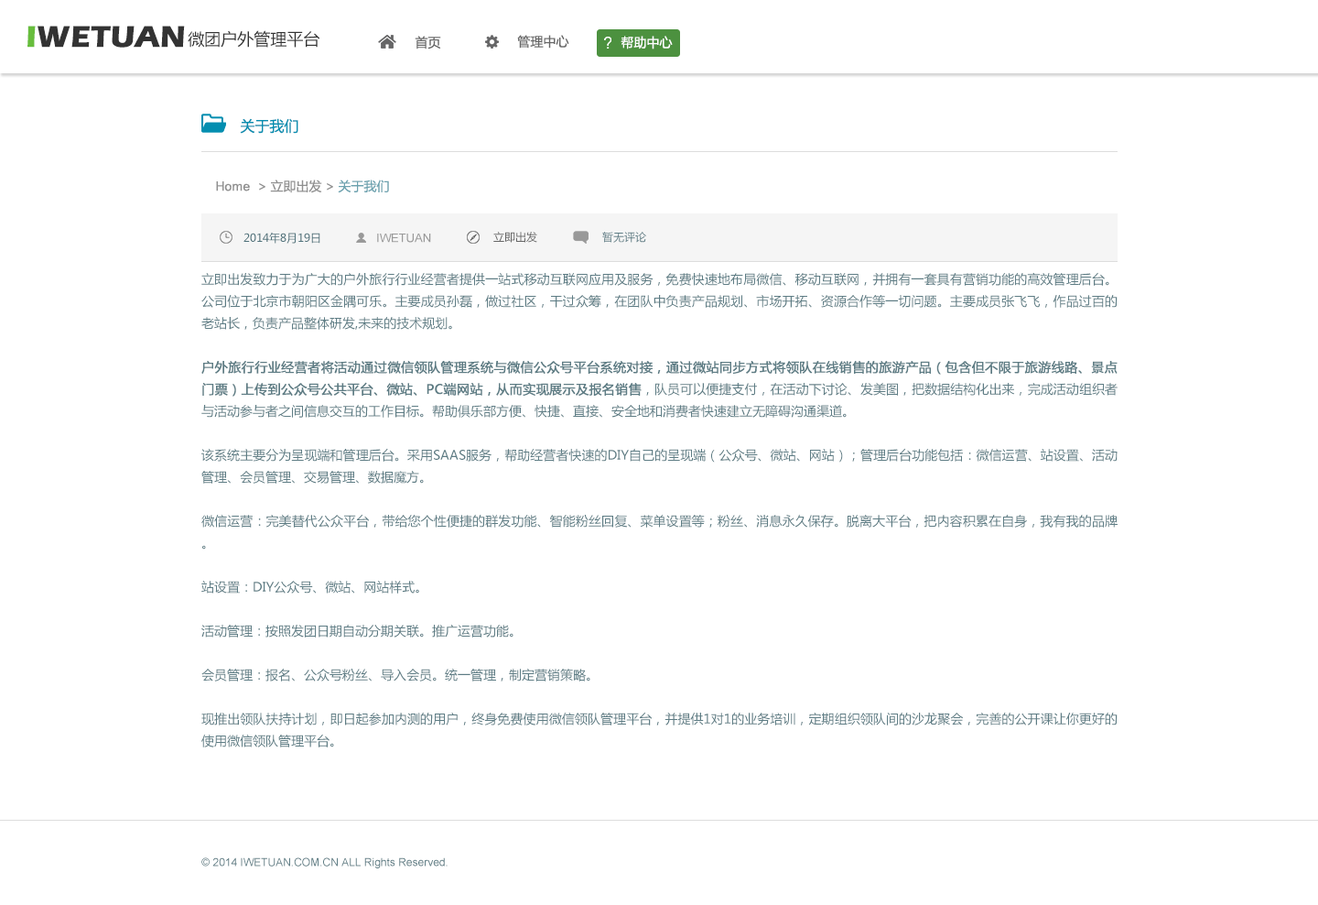
<style>
.page{position:relative;width:1318px;height:905px;background:#ffffff}
.page>*{position:absolute;margin:0}
.t1{font:31.1px "ErasITC-Bold";color:#333333}
.t2{font:31.1px "ErasITC-Bold";color:#67bd3c}
.t3{font:16.5px "MicrosoftYaHei";color:#333333}
.t4{font:12.8px "MicrosoftYaHei";color:#666666}
.t5{font:12.8px "MicrosoftYaHei";color:#ffffff}
.t6{font:14.6px "MicrosoftYaHei";color:#048eb0}
.t7{font:12.8px "MicrosoftYaHei";color:#8f8f8f}
.t8{font:12.8px "ArialMT";color:#8f8f8f}
.t9{font:12.8px "MicrosoftYaHei";color:#6ca2af}
.t10{font:11px "MicrosoftYaHei";color:#4e717a}
.t11{font:11.9px "ArialMT";color:#999999}
.t12{font:11px "MicrosoftYaHei";color:#666666}
.t13{font:11px "MicrosoftYaHei";color:#5d7c84}
.t14{font:12.8px/22px "MicrosoftYaHei";color:#5d7c84}
.t15{font:12.8px/22px "MicrosoftYaHei";color:#5d7c84;font-weight:bold}
.t16{font:11px "ArialMT";color:#5d7c84}
</style>
<div class="page">
<p class="t1" style="left:27px;top:26px;width:158px;height:22px"><span class="t2">I</span>WETUAN</p>
<p class="t3" style="left:188px;top:30px;width:132px;height:18px">微团户外管理平台</p>
<p class="t4" style="left:415px;top:36px;width:26px;height:13px">首页</p>
<p class="t4" style="left:517px;top:35px;width:52px;height:14px">管理中心</p>
<p class="t5" style="left:621px;top:36px;width:52px;height:13px">帮助中心</p>
<p class="t6" style="left:240px;top:118px;width:58px;height:16px">关于我们</p>
<p class="t7" style="left:216px;top:179px;width:173px;height:14px"><span class="t8">Home  </span>&gt; 立即出发 &gt; <span class="t9">关于我们</span></p>
<p class="t10" style="left:244px;top:232px;width:76px;height:12px">2014年8月19日</p>
<p class="t11" style="left:377px;top:233px;width:54px;height:10px">IWETUAN</p>
<p class="t12" style="left:493px;top:232px;width:44px;height:11px">立即出发</p>
<p class="t13" style="left:602px;top:232px;width:44px;height:11px">暂无评论</p>
<p class="t14" style="left:201px;top:272px;width:917px;height:475px;text-align:justify">立即出发致力于为广大的户外旅行行业经营者提供一站式移动互联网应用及服务，免费快速地布局微信、移动互联网，并拥有一套具有营销功能的高效管理后台。公司位于北京市朝阳区金隅可乐。主要成员孙磊，做过社区，干过众筹，在团队中负责产品规划、市场开拓、资源合作等一切问题。主要成员张飞飞，作品过百的老站长，负责产品整体研发,未来的技术规划。<br><br><span class="t15">户外旅行行业经营者将活动通过微信领队管理系统与微信公众号平台系统对接，通过微站同步方式将领队在线销售的旅游产品（包含但不限于旅游线路、景点门票）上传到公众号公共平台、微站、PC端网站，从而实现展示及报名销售</span>，队员可以便捷支付，在活动下讨论、发美图，把数据结构化出来，完成活动组织者与活动参与者之间信息交互的工作目标。帮助俱乐部方便、快捷、直接、安全地和消费者快速建立无障碍沟通渠道。<br><br>该系统主要分为呈现端和管理后台。采用SAAS服务，帮助经营者快速的DIY自己的呈现端（公众号、微站、网站）；管理后台功能包括：微信运营、站设置、活动管理、会员管理、交易管理、数据魔方。<br><br>微信运营：完美替代公众平台，带给您个性便捷的群发功能、智能粉丝回复、菜单设置等；粉丝、消息永久保存。脱离大平台，把内容积累在自身，我有我的品牌。<br><br>站设置：DIY公众号、微站、网站样式。<br><br>活动管理：按照发团日期自动分期关联。推广运营功能。<br><br>会员管理：报名、公众号粉丝、导入会员。统一管理，制定营销策略。<br><br>现推出领队扶持计划，即日起参加内测的用户，终身免费使用微信领队管理平台，并提供1对1的业务培训，定期组织领队间的沙龙聚会，完善的公开课让你更好的使用微信领队管理平台。</p>
<p class="t16" style="left:201px;top:857px;width:247px;height:11px">© 2014 IWETUAN.COM.CN ALL Rights Reserved.</p>
</div>
